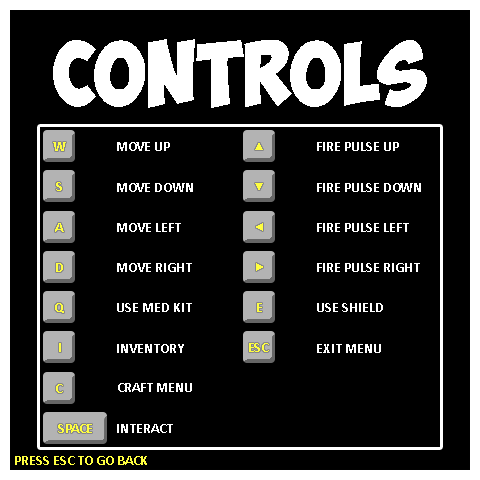
<style>
.page{position:relative;width:480px;height:480px;background:#000000}
.page>*{position:absolute;margin:0}
.t1{font:64px "ObelixPro";color:#ffffff}
.t2{font:14px "Calibri-Bold";color:#ffff40}
.t3{font:14px "Calibri-Bold";color:#ffffff}
</style>
<div class="page">
<p class="t1" style="left:53px;top:39px;width:374px;height:69px">controls</p>
<p class="t2" style="left:53px;top:142px;width:13px;height:9px">W</p>
<p class="t3" style="left:117px;top:142px;width:53px;height:9px">MOVE UP</p>
<p class="t3" style="left:317px;top:142px;width:82px;height:9px">FIRE PULSE UP</p>
<p class="t2" style="left:56px;top:182px;width:6px;height:9px">S</p>
<p class="t3" style="left:117px;top:183px;width:76px;height:9px">MOVE DOWN</p>
<p class="t3" style="left:317px;top:183px;width:104px;height:9px">FIRE PULSE DOWN</p>
<p class="t2" style="left:55px;top:223px;width:9px;height:9px">A</p>
<p class="t3" style="left:117px;top:223px;width:64px;height:9px">MOVE LEFT</p>
<p class="t3" style="left:317px;top:223px;width:92px;height:9px">FIRE PULSE LEFT</p>
<p class="t2" style="left:56px;top:263px;width:7px;height:9px">D</p>
<p class="t3" style="left:117px;top:263px;width:75px;height:9px">MOVE RIGHT</p>
<p class="t3" style="left:317px;top:263px;width:103px;height:9px">FIRE PULSE RIGHT</p>
<p class="t2" style="left:55px;top:303px;width:9px;height:10px">Q</p>
<p class="t3" style="left:117px;top:303px;width:75px;height:9px">USE MED KIT</p>
<p class="t2" style="left:257px;top:303px;width:5px;height:9px">E</p>
<p class="t3" style="left:317px;top:303px;width:66px;height:9px">USE SHIELD</p>
<p class="t3" style="left:117px;top:344px;width:67px;height:9px">INVENTORY</p>
<p class="t2" style="left:249px;top:343px;width:20px;height:9px">ESC</p>
<p class="t3" style="left:317px;top:344px;width:64px;height:9px">EXIT MENU</p>
<p class="t2" style="left:56px;top:384px;width:7px;height:9px">C</p>
<p class="t3" style="left:118px;top:383px;width:74px;height:9px">CRAFT MENU</p>
<p class="t2" style="left:58px;top:424px;width:34px;height:9px">SPACE</p>
<p class="t3" style="left:117px;top:424px;width:56px;height:9px">INTERACT</p>
<p class="t2" style="left:15px;top:456px;width:132px;height:9px">PRESS ESC TO GO BACK</p>
</div>
